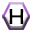
<style>
.page{position:relative;width:32px;height:32px;background:#ffffff}
.page>*{position:absolute;margin:0}
.t1{font:22px "BerlinSansFB-Reg";color:#000000}
</style>
<div class="page">
<p class="t1" style="left:9px;top:9px;width:15px;height:15px">H</p>
</div>
